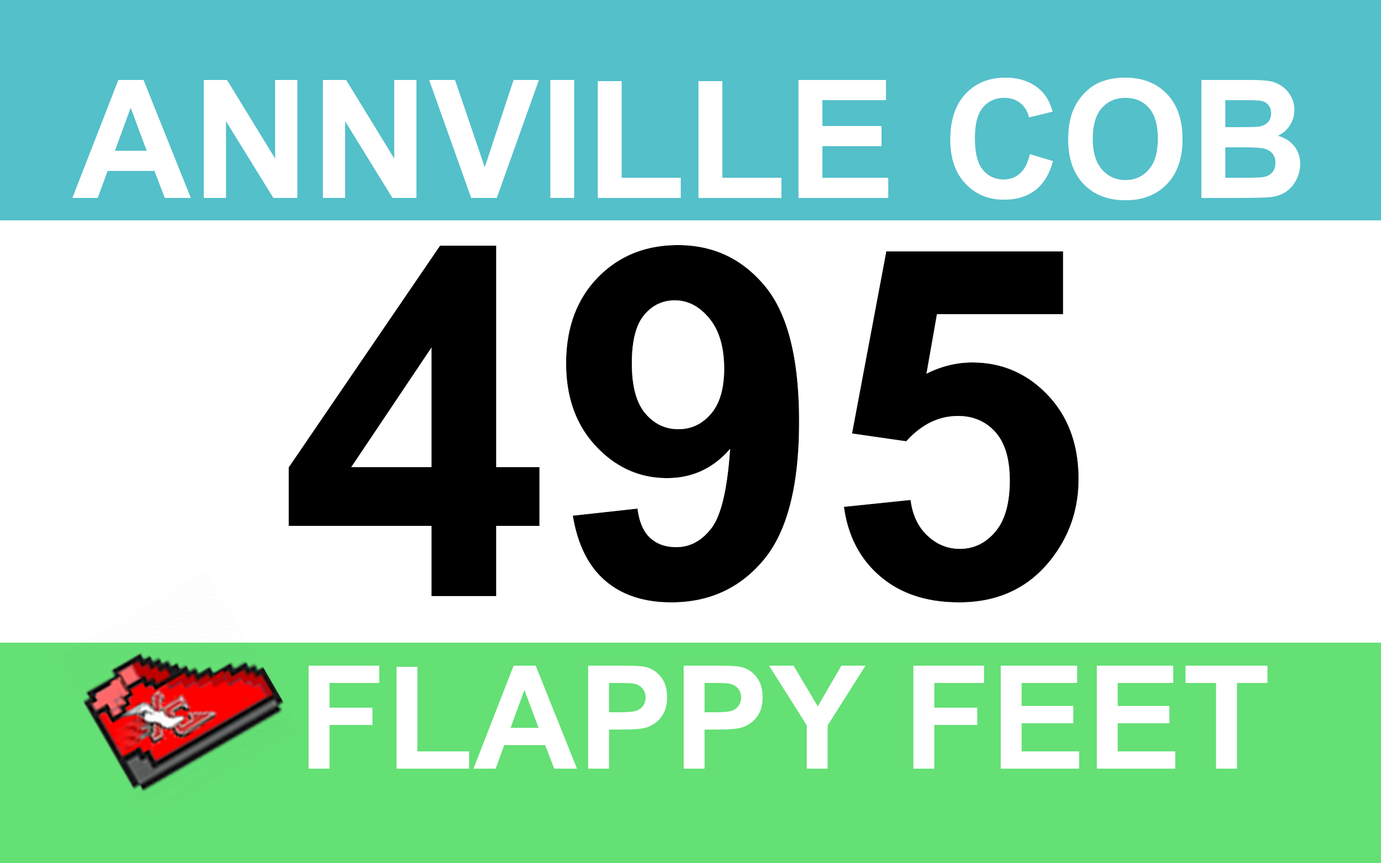
<style>
.page{position:relative;width:1381px;height:863px;background:#ffffff}
.page>*{position:absolute;margin:0}
.t1{font:164.8px "Arial-BoldMT";color:#ffffff}
.t2{font:487.7px "Arial-BoldMT";color:#000000}
.t3{font:143.9px "Arial-BoldMT";color:#ffffff}
</style>
<div class="page">
<p class="t1" style="left:72px;top:78px;width:1229px;height:122px">ANNVILLE COB</p>
<p class="t2" style="left:288px;top:245px;width:791px;height:358px">495</p>
<p class="t3" style="left:308px;top:666px;width:960px;height:103px">FLAPPY FEET</p>
</div>
